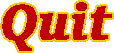
<style>
.page{position:relative;width:114px;height:53px;background:#ffffff}
.page>*{position:absolute;margin:0}
.t1{font:52.9px "SitkaText-BoldItalic";color:#c00007;font-weight:bold;scale:0.93 1}
</style>
<div class="page">
<p class="t1" style="left:2px;top:2px;width:110px;height:49px">Quit</p>
</div>
